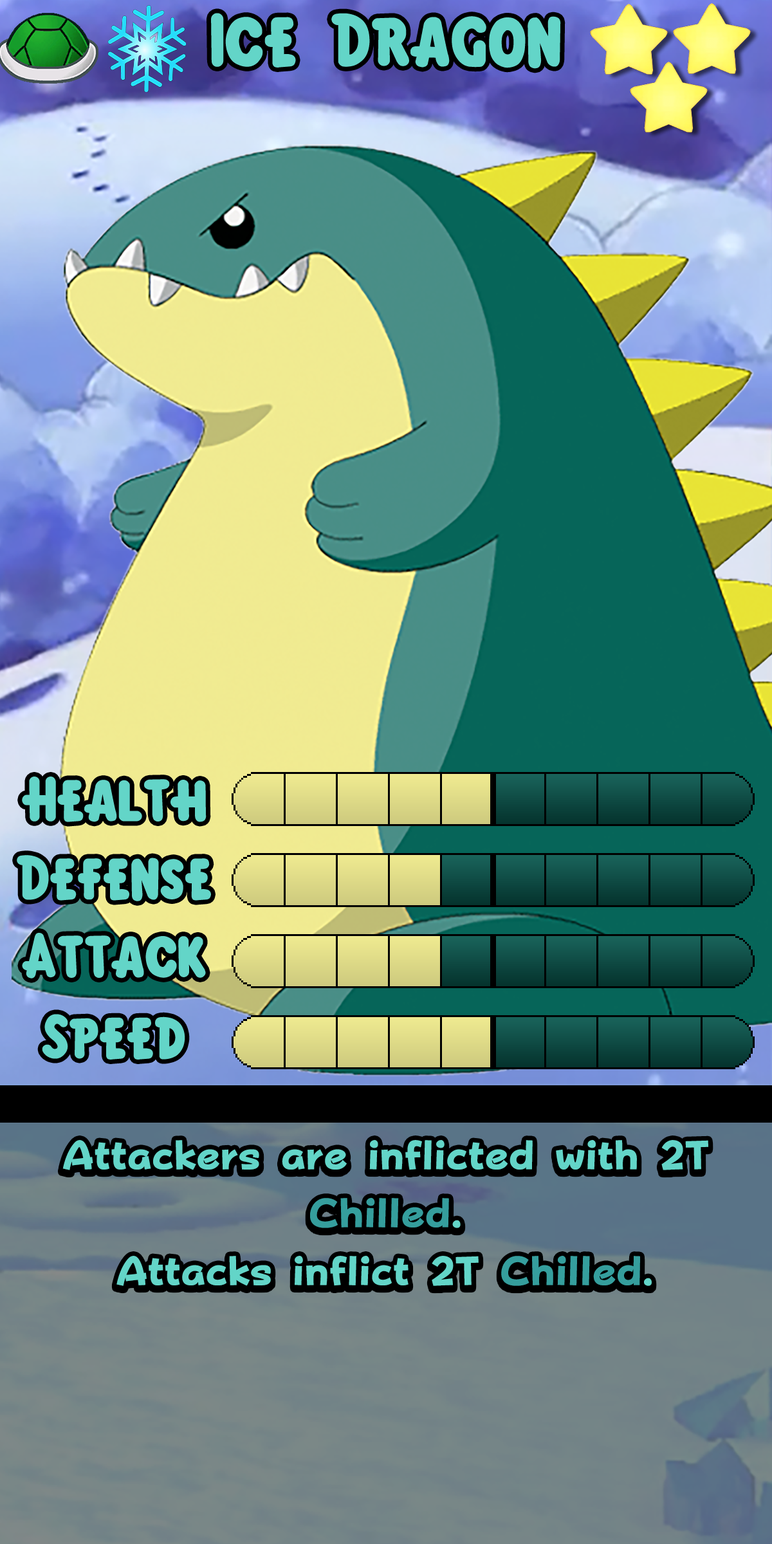
<style>
.page{position:relative;width:772px;height:1544px}
.page>*{position:absolute;margin:0}
.t1{font:115.8px "KirbyClassic";color:#63d5c8}
.t2{font:96.5px "KirbyClassic";color:#63d5c8}
.t3{font:69.5px/57.9px "FOTPopHappinessStrp-ExtraBold";color:#63d5c8}
.t4{font:69.5px/57.9px "FOTPopHappinessStrp-ExtraBold";color:#359e9d}
</style>
<div class="page">
<p class="t1" style="left:211px;top:13px;width:350px;height:56px">Ice Dragon</p>
<p class="t2" style="left:22px;top:777px;width:185px;height:45px">Health</p>
<p class="t2" style="left:17px;top:855px;width:194px;height:46px">Defense</p>
<p class="t2" style="left:22px;top:933px;width:184px;height:46px">Attack</p>
<p class="t2" style="left:42px;top:1014px;width:143px;height:46px">Speed</p>
<p class="t3" style="left:62px;top:1140px;width:646px;height:146px;text-align:center">Attackers are inflicted with 2T <span class="t4">Chilled</span>.<br>Attacks inflict 2T <span class="t4">Chilled</span>.</p>
</div>
